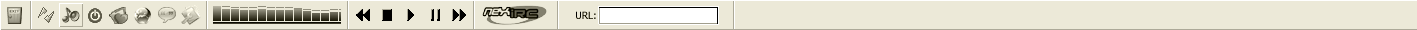
<style>
.page{position:relative;width:1417px;height:30px;background:#ece9d8}
.page>*{position:absolute;margin:0}
.t1{font:10px "Tahoma";color:#000000}
</style>
<div class="page">
<p class="t1" style="left:576px;top:11px;width:20px;height:8px">URL:</p>
</div>
